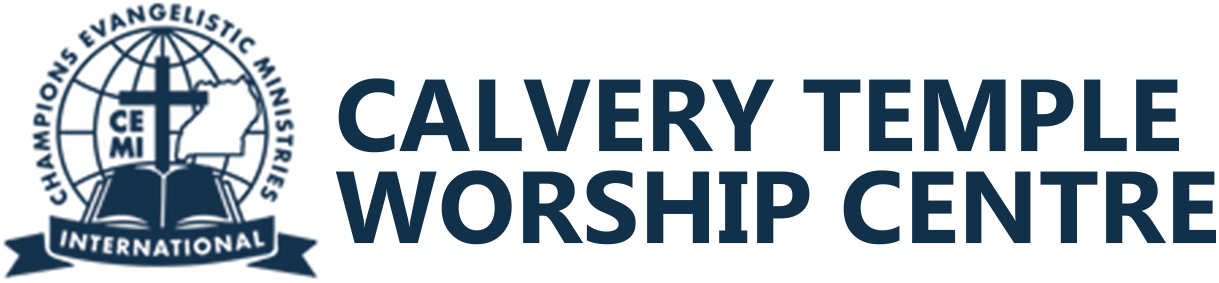
<style>
.page{position:relative;width:1219px;height:283px;background:#ffffff}
.page>*{position:absolute;margin:0}
.t1{font:102px/92px "MicrosoftPhagsPa-Bold";color:#11304c}
</style>
<div class="page">
<p class="t1" style="left:335px;top:78px;width:881px;height:167px">CALVERY TEMPLE<br>WORSHIP CENTRE</p>
</div>
